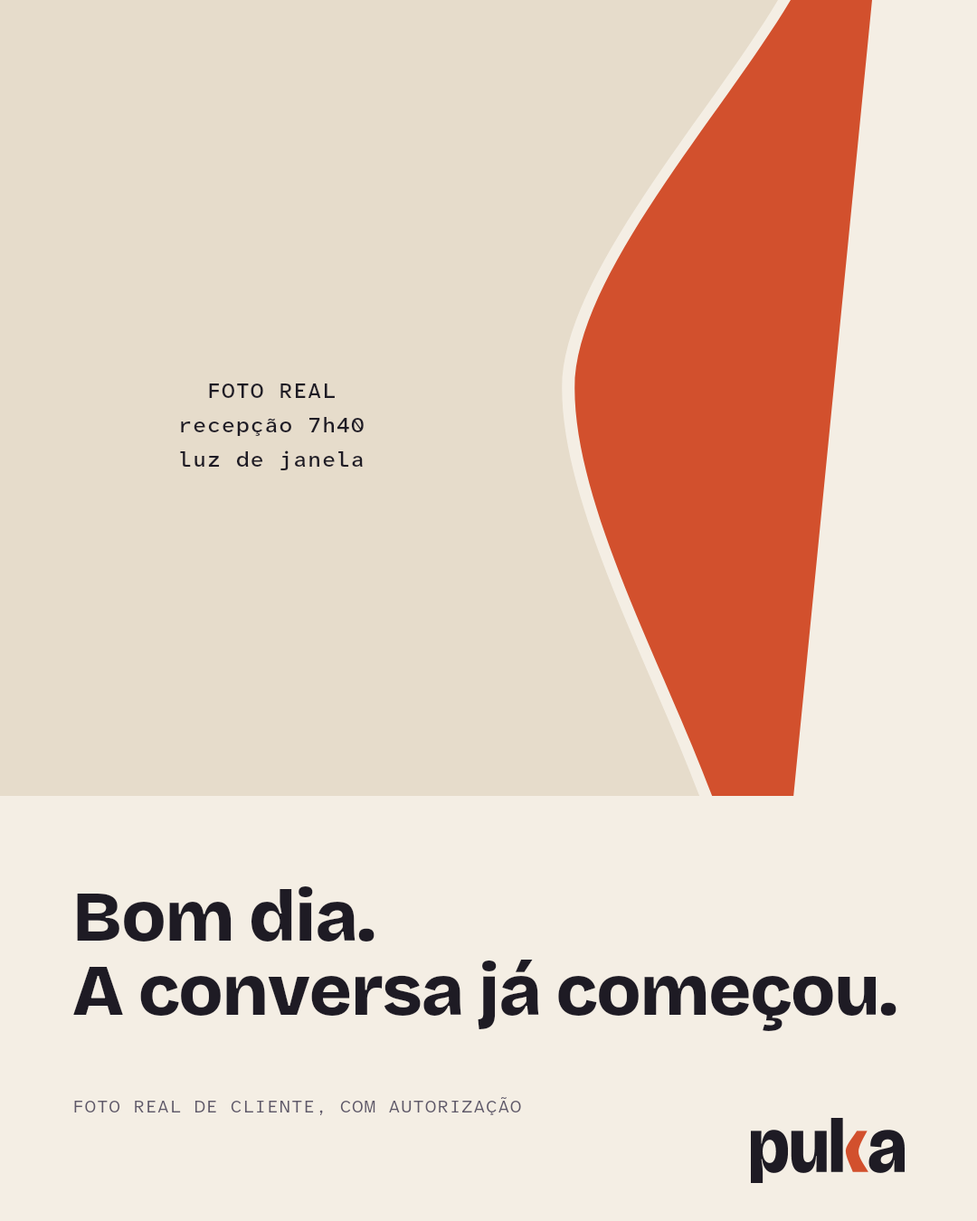
<style>
.page{position:relative;width:977px;height:1221px;background:#e6dccb}
.page>*{position:absolute;margin:0}
.t1{font:21.7px/34.4px "AtkinsonHyperlegibleMono-Medium";letter-spacing:0.03em;color:#1e1b24}
.t2{font:72.3px/74.2px "BricolageGrotesque-ExtraBold";letter-spacing:-0.012em;color:#1e1b24}
.t3{font:18.1px "AtkinsonHyperlegibleMono-Regular";letter-spacing:0.04em;color:#5e5868}
</style>
<div class="page">
<p class="t1" style="left:180px;top:383px;width:184px;height:87px;text-align:center">FOTO REAL<br>recepção 7h40<br>luz de janela</p>
<p class="t2" style="left:73px;top:886px;width:823px;height:145px">Bom dia.<br>A conversa já começou.</p>
<p class="t3" style="left:74px;top:1097px;width:447px;height:18px">FOTO REAL DE CLIENTE, COM AUTORIZAÇÃO</p>
</div>
